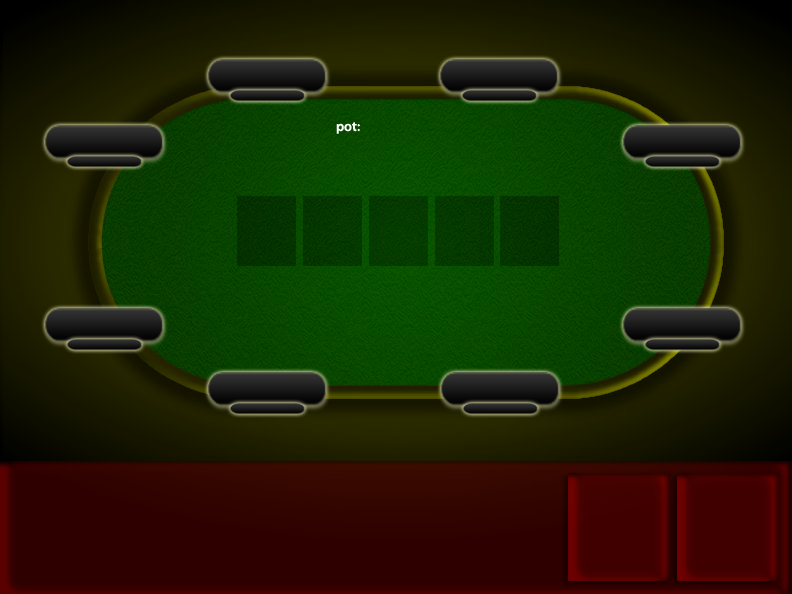
<style>
.page{position:relative;width:792px;height:594px}
.page>*{position:absolute;margin:0}
.t1{font:14px "MyriadPro-Semibold";color:#ffffff}
</style>
<div class="page">
<p class="t1" style="left:336px;top:122px;width:24px;height:12px">pot:</p>
</div>
